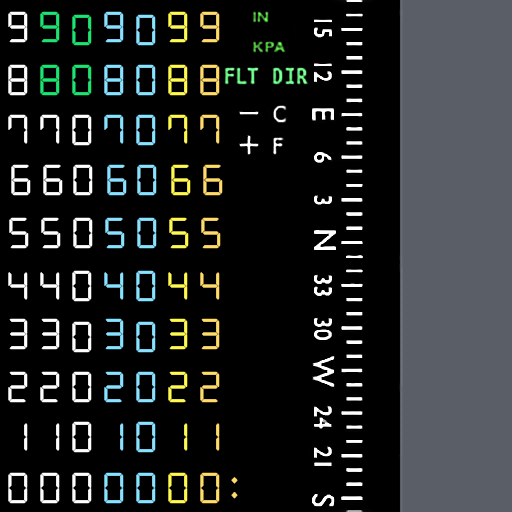
<style>
.page{position:relative;width:512px;height:512px;background:#000000}
.page>*{position:absolute;margin:0}
.t1{font:30px "DSEG7Classic-Regular";letter-spacing:0.05em;color:#ffffff}
.t2{font:30px "DSEG7Classic-Regular";letter-spacing:0.05em;color:#1ce371}
.t3{font:30px "DSEG7Classic-Regular";letter-spacing:0.05em;color:#89e2ff}
.t4{font:30px "DSEG7Classic-Regular";letter-spacing:0.05em;color:#fff951}
.t5{font:30px "DSEG7Classic-Regular";letter-spacing:0.05em;color:#ffdb6b}
.t6{font:44px "alarmclock";letter-spacing:0.05em;color:#ffdb6b}
</style>
<div class="page">
<p class="t1" style="left:8px;top:11px;width:20px;height:32px">9</p>
<p class="t2" style="left:40px;top:11px;width:20px;height:32px">9</p>
<p class="t2" style="left:72px;top:14px;width:20px;height:32px">0</p>
<p class="t3" style="left:104px;top:11px;width:20px;height:32px">9</p>
<p class="t3" style="left:136px;top:14px;width:20px;height:32px">0</p>
<p class="t4" style="left:168px;top:11px;width:20px;height:32px">9</p>
<p class="t5" style="left:200px;top:11px;width:20px;height:32px">9</p>
<p class="t1" style="left:8px;top:64px;width:20px;height:32px">8</p>
<p class="t2" style="left:40px;top:64px;width:20px;height:32px">8</p>
<p class="t2" style="left:72px;top:64px;width:20px;height:32px">0</p>
<p class="t3" style="left:104px;top:64px;width:20px;height:32px">8</p>
<p class="t3" style="left:136px;top:64px;width:20px;height:32px">0</p>
<p class="t4" style="left:168px;top:64px;width:20px;height:32px">8</p>
<p class="t5" style="left:200px;top:64px;width:20px;height:32px">8</p>
<p class="t1" style="left:8px;top:114px;width:20px;height:30px">7</p>
<p class="t1" style="left:40px;top:114px;width:20px;height:30px">7</p>
<p class="t1" style="left:72px;top:114px;width:20px;height:32px">0</p>
<p class="t3" style="left:104px;top:114px;width:20px;height:30px">7</p>
<p class="t3" style="left:136px;top:114px;width:20px;height:32px">0</p>
<p class="t4" style="left:168px;top:114px;width:20px;height:30px">7</p>
<p class="t5" style="left:200px;top:114px;width:20px;height:30px">7</p>
<p class="t1" style="left:11px;top:164px;width:20px;height:32px">6</p>
<p class="t1" style="left:43px;top:164px;width:20px;height:32px">6</p>
<p class="t1" style="left:73px;top:164px;width:20px;height:32px">0</p>
<p class="t3" style="left:107px;top:164px;width:20px;height:32px">6</p>
<p class="t3" style="left:137px;top:164px;width:20px;height:32px">0</p>
<p class="t4" style="left:171px;top:164px;width:20px;height:32px">6</p>
<p class="t5" style="left:203px;top:164px;width:20px;height:32px">6</p>
<p class="t1" style="left:9px;top:217px;width:20px;height:32px">5</p>
<p class="t1" style="left:41px;top:217px;width:20px;height:32px">5</p>
<p class="t1" style="left:73px;top:217px;width:20px;height:32px">0</p>
<p class="t3" style="left:105px;top:217px;width:20px;height:32px">5</p>
<p class="t3" style="left:137px;top:217px;width:20px;height:32px">0</p>
<p class="t4" style="left:169px;top:217px;width:20px;height:32px">5</p>
<p class="t5" style="left:201px;top:217px;width:20px;height:32px">5</p>
<p class="t1" style="left:72px;top:270px;width:20px;height:32px">0</p>
<p class="t3" style="left:136px;top:270px;width:20px;height:32px">0</p>
<p class="t1" style="left:8px;top:272px;width:20px;height:28px">4</p>
<p class="t1" style="left:40px;top:272px;width:20px;height:28px">4</p>
<p class="t3" style="left:104px;top:272px;width:20px;height:28px">4</p>
<p class="t4" style="left:168px;top:272px;width:20px;height:28px">4</p>
<p class="t5" style="left:200px;top:272px;width:20px;height:28px">4</p>
<p class="t1" style="left:9px;top:318px;width:19px;height:32px">3</p>
<p class="t1" style="left:41px;top:318px;width:19px;height:32px">3</p>
<p class="t3" style="left:105px;top:318px;width:19px;height:32px">3</p>
<p class="t4" style="left:169px;top:318px;width:19px;height:32px">3</p>
<p class="t5" style="left:201px;top:318px;width:19px;height:32px">3</p>
<p class="t1" style="left:72px;top:321px;width:20px;height:32px">0</p>
<p class="t3" style="left:136px;top:321px;width:20px;height:32px">0</p>
<p class="t1" style="left:8px;top:371px;width:20px;height:32px">2</p>
<p class="t1" style="left:40px;top:371px;width:20px;height:32px">2</p>
<p class="t1" style="left:72px;top:371px;width:20px;height:32px">0</p>
<p class="t3" style="left:104px;top:371px;width:20px;height:32px">2</p>
<p class="t3" style="left:136px;top:371px;width:20px;height:32px">0</p>
<p class="t4" style="left:168px;top:371px;width:20px;height:32px">2</p>
<p class="t5" style="left:200px;top:371px;width:20px;height:32px">2</p>
<p class="t1" style="left:24px;top:423px;width:4px;height:28px">1</p>
<p class="t1" style="left:56px;top:423px;width:4px;height:28px">1</p>
<p class="t1" style="left:72px;top:421px;width:20px;height:32px">0</p>
<p class="t3" style="left:120px;top:423px;width:4px;height:28px">1</p>
<p class="t3" style="left:136px;top:421px;width:20px;height:32px">0</p>
<p class="t4" style="left:184px;top:423px;width:4px;height:28px">1</p>
<p class="t5" style="left:216px;top:423px;width:4px;height:28px">1</p>
<p class="t1" style="left:8px;top:472px;width:20px;height:32px">0</p>
<p class="t1" style="left:40px;top:472px;width:20px;height:32px">0</p>
<p class="t1" style="left:72px;top:472px;width:20px;height:32px">0</p>
<p class="t3" style="left:104px;top:472px;width:20px;height:32px">0</p>
<p class="t3" style="left:136px;top:472px;width:20px;height:32px">0</p>
<p class="t4" style="left:168px;top:472px;width:20px;height:32px">0</p>
<p class="t5" style="left:200px;top:472px;width:20px;height:32px">0</p>
<p class="t6" style="left:231px;top:477px;width:7px;height:22px">:</p>
</div>
